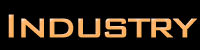
<style>
.page{position:relative;width:200px;height:50px;background:#000000}
.page>*{position:absolute;margin:0}
.t1{font:43.8px "BankGothicBT-Light";letter-spacing:-0.075em;color:#ffb467;font-weight:bold}
</style>
<div class="page">
<p class="t1" style="left:8px;top:14px;width:189px;height:24px">Industry</p>
</div>
